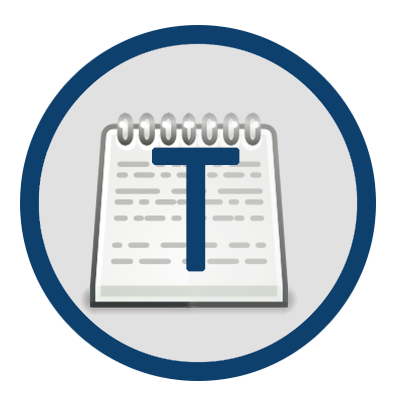
<style>
.page{position:relative;width:400px;height:400px;background:#ffffff}
.page>*{position:absolute;margin:0}
.t1{font:291.5px "MicrosoftTaiLe";color:#0e406e;font-weight:bold}
</style>
<div class="page">
<p class="t1" style="left:152px;top:147px;width:88px;height:125px">T</p>
</div>
